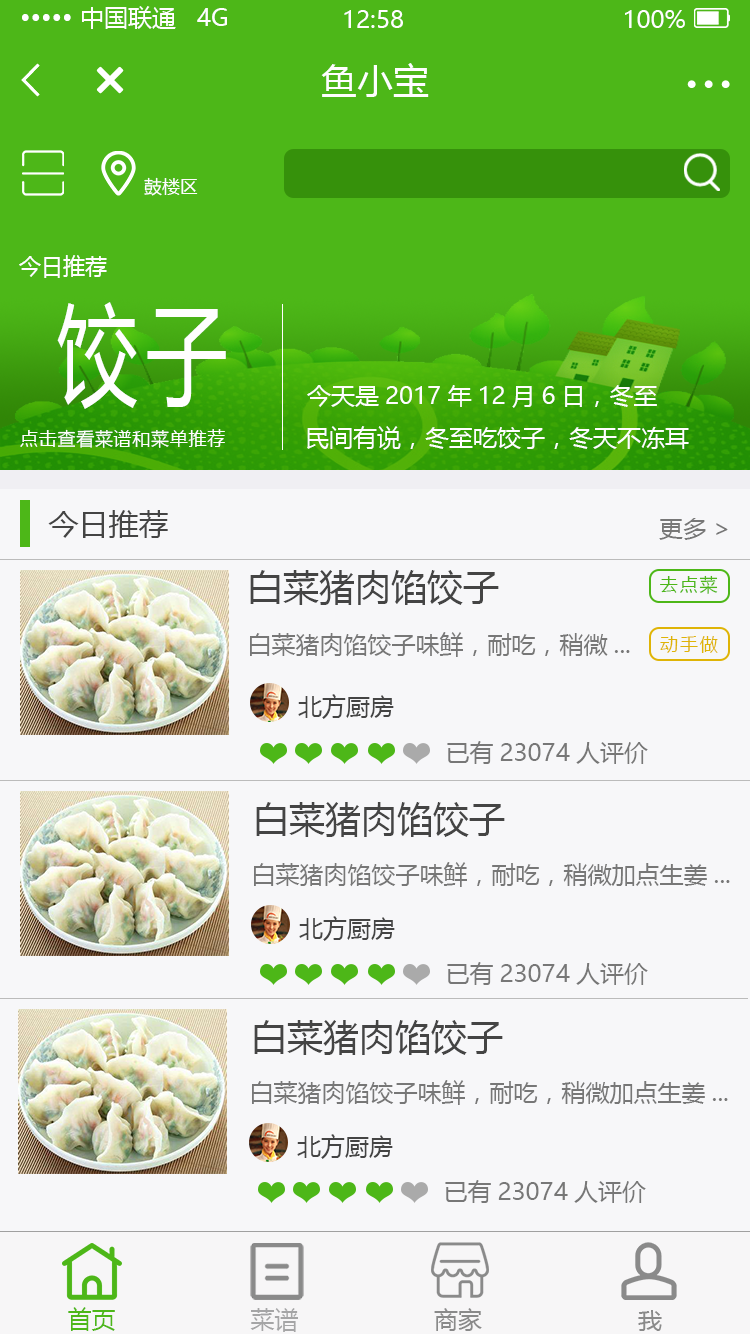
<style>
.page{position:relative;width:750px;height:1334px;background:#f7f7f9}
.page>*{position:absolute;margin:0}
.t1{font:24px "MicrosoftYaHei";color:#fffefe}
.t2{font:36px "MicrosoftYaHei";color:#fffefe}
.t3{font:18px "MicrosoftYaHei";color:#fffefe}
.t4{font:22px "MicrosoftYaHei";color:#fffefe}
.t5{font:110px "MicrosoftYaHei";letter-spacing:0.1em;color:#fffefe;scale:0.74 1}
.t6{font:18px "MicrosoftYaHei";letter-spacing:0.04em;color:#fffefe}
.t7{font:30px "MicrosoftYaHei";color:#444444}
.t8{font:24px "MicrosoftYaHei";color:#777777}
.t9{font:36px "MicrosoftYaHei";color:#444444}
.t10{font:18px "MicrosoftYaHei";letter-spacing:0.1em;color:#4db718}
.t11{font:18px "MicrosoftYaHei";letter-spacing:0.1em;color:#dfb406}
.t12{font:24px "MicrosoftYaHei";color:#444444}
.t13{font:24px "MicrosoftYaHei";color:#4db718}
.t14{font:24px "MicrosoftYaHei";color:#a5a5a6}
.t15{font:24px "MicrosoftYaHei";color:#8a8a8a}
</style>
<div class="page">
<p class="t1" style="left:22px;top:6px;width:205px;height:23px">••••• 中国联通   4G</p>
<p class="t1" style="left:344px;top:10px;width:59px;height:18px">12:58</p>
<p class="t1" style="left:625px;top:10px;width:60px;height:18px">100%</p>
<p class="t2" style="left:321px;top:63px;width:108px;height:34px">鱼小宝</p>
<p class="t3" style="left:144px;top:177px;width:54px;height:19px">鼓楼区</p>
<p class="t4" style="left:19px;top:255px;width:88px;height:23px">今日推荐</p>
<p class="t5" style="left:57px;top:302px;width:169px;height:107px">饺子</p>
<p class="t1" style="left:307px;top:385px;width:350px;height:23px">今天是2017年12月6日，冬至</p>
<p class="t6" style="left:20px;top:429px;width:205px;height:19px">点击查看菜谱和菜单推荐</p>
<p class="t1" style="left:307px;top:426px;width:382px;height:24px">民间有说，冬至吃饺子，冬天不冻耳</p>
<p class="t7" style="left:48px;top:510px;width:120px;height:28px">今日推荐</p>
<p class="t8" style="left:659px;top:518px;width:69px;height:22px">更多&gt;</p>
<p class="t9" style="left:250px;top:570px;width:249px;height:35px">白菜猪肉馅饺子</p>
<p class="t10" style="left:660px;top:575px;width:58px;height:19px">去点菜</p>
<p class="t8" style="left:250px;top:632px;width:380px;height:25px">白菜猪肉馅饺子味鲜，耐吃，稍微...</p>
<p class="t11" style="left:660px;top:636px;width:58px;height:17px">动手做</p>
<p class="t12" style="left:298px;top:694px;width:96px;height:25px">北方厨房</p>
<p class="t8" style="left:447px;top:741px;width:201px;height:23px">已有23074人评价</p>
<p class="t9" style="left:256px;top:802px;width:249px;height:35px">白菜猪肉馅饺子</p>
<p class="t8" style="left:254px;top:862px;width:476px;height:25px">白菜猪肉馅饺子味鲜，耐吃，稍微加点生姜...</p>
<p class="t12" style="left:299px;top:916px;width:96px;height:25px">北方厨房</p>
<p class="t8" style="left:447px;top:962px;width:201px;height:23px">已有23074人评价</p>
<p class="t9" style="left:254px;top:1020px;width:249px;height:35px">白菜猪肉馅饺子</p>
<p class="t8" style="left:252px;top:1080px;width:476px;height:25px">白菜猪肉馅饺子味鲜，耐吃，稍微加点生姜...</p>
<p class="t12" style="left:297px;top:1134px;width:96px;height:25px">北方厨房</p>
<p class="t8" style="left:445px;top:1180px;width:201px;height:23px">已有23074人评价</p>
<p class="t13" style="left:68px;top:1307px;width:47px;height:24px">首页</p>
<p class="t14" style="left:250px;top:1308px;width:48px;height:24px">菜谱</p>
<p class="t15" style="left:434px;top:1308px;width:48px;height:23px">商家</p>
<p class="t15" style="left:638px;top:1310px;width:24px;height:21px">我</p>
</div>
